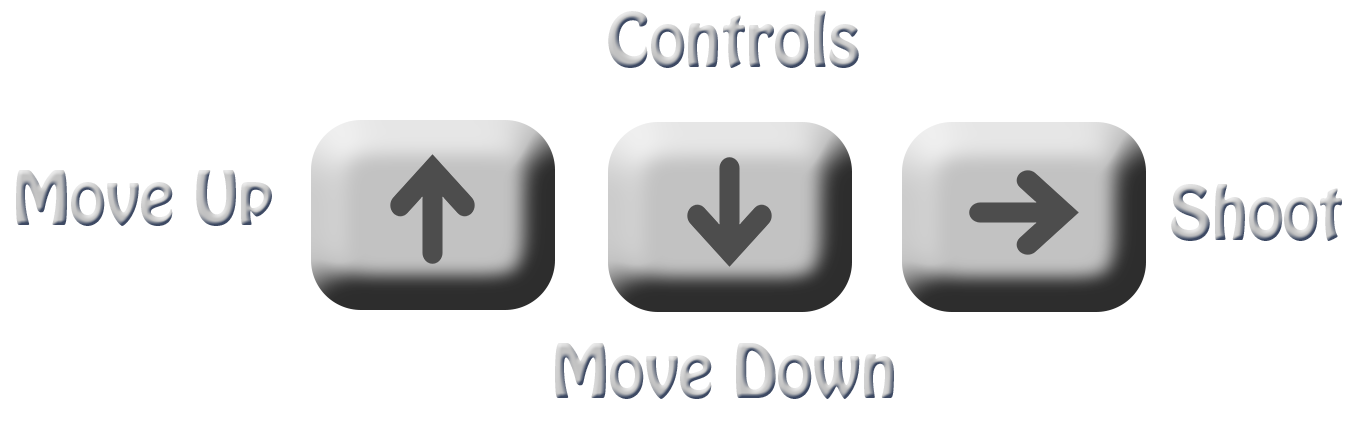
<style>
.page{position:relative;width:1351px;height:432px;background:#ffffff}
.page>*{position:absolute;margin:0}
.t1{font:66px "HoboStd"}
</style>
<div class="page">
<p class="t1" style="left:608px;top:10px;width:251px;height:58px">Controls</p>
<p class="t1" style="left:16px;top:170px;width:256px;height:56px">Move Up</p>
<p class="t1" style="left:1171px;top:184px;width:171px;height:57px">Shoot</p>
<p class="t1" style="left:555px;top:343px;width:339px;height:56px">Move Down</p>
</div>
